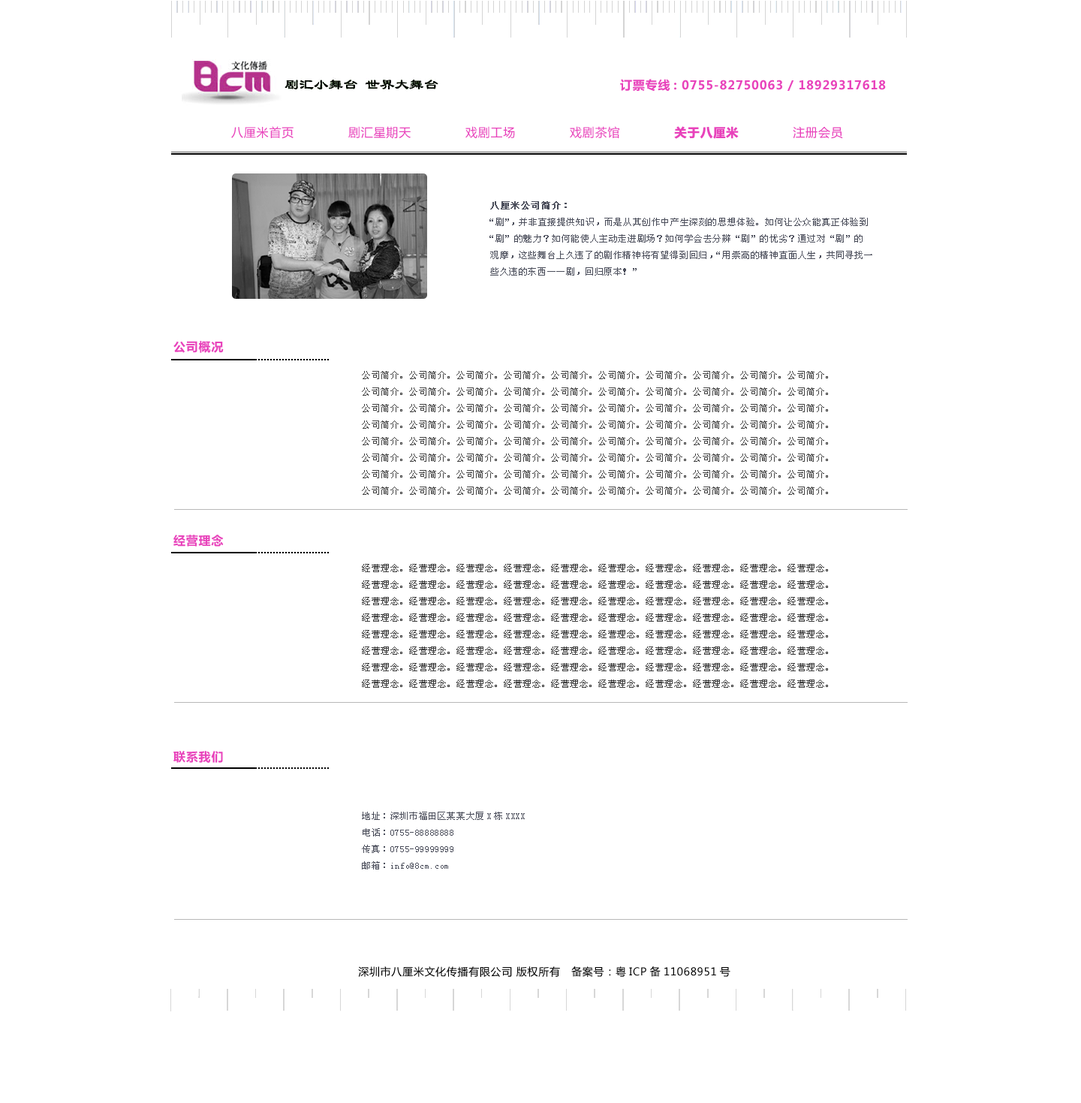
<style>
.page{position:relative;width:1081px;height:1103px;background:#ffffff}
.page>*{position:absolute;margin:0}
.t1{font:12px "MicrosoftYaHei";letter-spacing:0.05em;color:#e843bb}
.t2{font:12px "MicrosoftYaHei";letter-spacing:0.05em;color:#e843bb;font-weight:bold}
.t3{font:9px/16.5px "SimSun";letter-spacing:0.05em;color:#4b4e5b}
.t4{font:9px/16.5px "SimSun";letter-spacing:0.05em;color:#4b4e5b;font-weight:bold}
.t5{font:9px/16.5px "SimSun";letter-spacing:0.05em;color:#414141}
.t6{font:9px/16.5px "SimSun";letter-spacing:0.05em;color:#3c3c3c}
.t7{font:10.5px "MicrosoftYaHei";letter-spacing:0.05em;color:#000000}
</style>
<div class="page">
<p class="t1" style="left:620px;top:79px;width:266px;height:13px">订票专线: 0755-82750063 / 18929317618</p>
<p class="t1" style="left:231px;top:126px;width:612px;height:13px">八厘米首页             剧汇星期天             戏剧工场             戏剧茶馆             <span class="t2">关于八厘米</span>             注册会员</p>
<p class="t3" style="left:490px;top:201px;width:382px;height:75px"><span class="t4">八厘米公司简介：<br></span>“剧”，并非直接提供知识，而是从其创作中产生深刻的思想体验。如何让公众能真正体验到<br>“剧”的魅力？如何能使人主动走进剧场？如何学会去分辨“剧”的优劣？通过对“剧”的<br>观摩，这些舞台上久违了的剧作精神将有望得到回归，“用崇高的精神直面人生，共同寻找一<br>些久违的东西——剧，回归原本！”</p>
<p class="t1" style="left:173px;top:341px;width:51px;height:12px">公司概况</p>
<p class="t5" style="left:362px;top:371px;width:466px;height:124px">公司简介。公司简介。公司简介。公司简介。公司简介。公司简介。公司简介。公司简介。公司简介。公司简介。<br>公司简介。公司简介。公司简介。公司简介。公司简介。公司简介。公司简介。公司简介。公司简介。公司简介。<br>公司简介。公司简介。公司简介。公司简介。公司简介。公司简介。公司简介。公司简介。公司简介。公司简介。<br>公司简介。公司简介。公司简介。公司简介。公司简介。公司简介。公司简介。公司简介。公司简介。公司简介。<br>公司简介。公司简介。公司简介。公司简介。公司简介。公司简介。公司简介。公司简介。公司简介。公司简介。<br>公司简介。公司简介。公司简介。公司简介。公司简介。公司简介。公司简介。公司简介。公司简介。公司简介。<br>公司简介。公司简介。公司简介。公司简介。公司简介。公司简介。公司简介。公司简介。公司简介。公司简介。<br>公司简介。公司简介。公司简介。公司简介。公司简介。公司简介。公司简介。公司简介。公司简介。公司简介。</p>
<p class="t1" style="left:173px;top:535px;width:51px;height:12px">经营理念</p>
<p class="t6" style="left:362px;top:564px;width:466px;height:124px">经营理念。经营理念。经营理念。经营理念。经营理念。经营理念。经营理念。经营理念。经营理念。经营理念。<br>经营理念。经营理念。经营理念。经营理念。经营理念。经营理念。经营理念。经营理念。经营理念。经营理念。<br>经营理念。经营理念。经营理念。经营理念。经营理念。经营理念。经营理念。经营理念。经营理念。经营理念。<br>经营理念。经营理念。经营理念。经营理念。经营理念。经营理念。经营理念。经营理念。经营理念。经营理念。<br>经营理念。经营理念。经营理念。经营理念。经营理念。经营理念。经营理念。经营理念。经营理念。经营理念。<br>经营理念。经营理念。经营理念。经营理念。经营理念。经营理念。经营理念。经营理念。经营理念。经营理念。<br>经营理念。经营理念。经营理念。经营理念。经营理念。经营理念。经营理念。经营理念。经营理念。经营理念。<br>经营理念。经营理念。经营理念。经营理念。经营理念。经营理念。经营理念。经营理念。经营理念。经营理念。</p>
<p class="t1" style="left:173px;top:751px;width:50px;height:12px">联系我们</p>
<p class="t3" style="left:362px;top:812px;width:163px;height:57px">地址：深圳市福田区某某大厦X栋XXXX<br>电话：0755-88888888<br>传真：0755-99999999<br>邮箱：info@8cm.com</p>
<p class="t7" style="left:358px;top:966px;width:373px;height:11px">深圳市八厘米文化传播有限公司 版权所有   备案号：粤ICP备11068951号</p>
</div>
